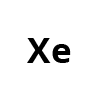
<style>
.page{position:relative;width:100px;height:100px;background:#ffffff}
.page>*{position:absolute;margin:0}
.t1{font:35px "OpenSans-Bold";color:#000000}
</style>
<div class="page">
<p class="t1" style="left:27px;top:38px;width:44px;height:25px">Xe</p>
</div>
